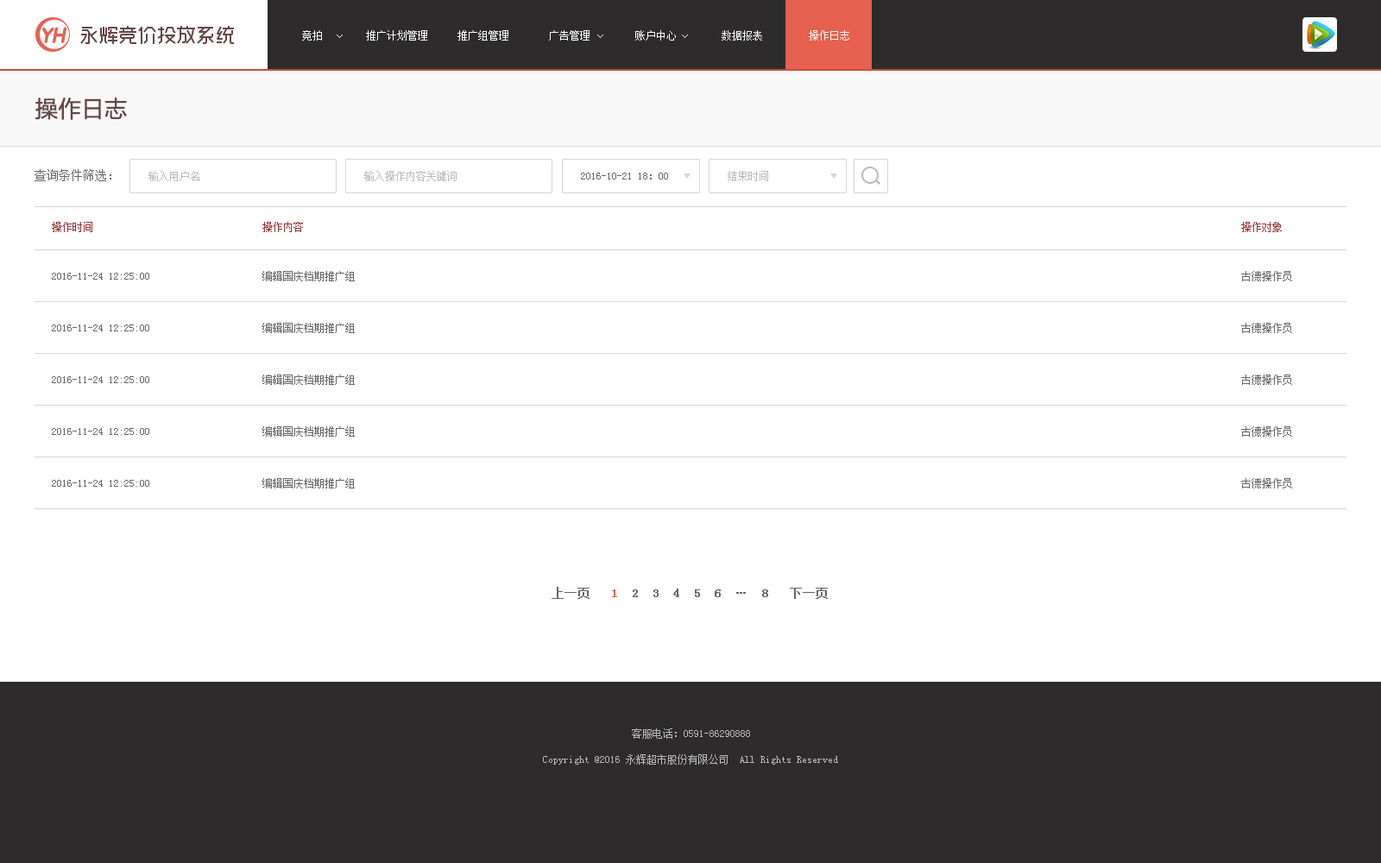
<style>
.page{position:relative;width:1381px;height:863px;background:#ffffff}
.page>*{position:absolute;margin:0}
.t1{font:10.4px "SimSun";color:#ffffff}
.t2{font:10.4px "SimSun";color:#f8f8f8}
.t3{font:22.4px "MicrosoftYaHei";color:#664545;font-weight:bold}
.t4{font:12.1px "SimSun";color:#666666}
.t5{font:10.4px "SimSun";color:#bababa}
.t6{font:10.4px "SimSun";color:#666666}
.t7{font:10.4px "SimSun";color:#953232}
.t8{font:12.1px "SimSun";color:#666666;font-weight:bold}
.t9{font:12.1px "SimSun";color:#e6614f;font-weight:bold}
</style>
<div class="page">
<p class="t1" style="left:302px;top:30px;width:20px;height:11px">竞拍</p>
<p class="t1" style="left:366px;top:30px;width:61px;height:11px">推广计划管理</p>
<p class="t1" style="left:458px;top:30px;width:50px;height:11px">推广组管理</p>
<p class="t1" style="left:549px;top:30px;width:41px;height:11px">广告管理</p>
<p class="t1" style="left:635px;top:30px;width:41px;height:11px">账户中心</p>
<p class="t2" style="left:722px;top:30px;width:40px;height:11px">数据报表</p>
<p class="t2" style="left:809px;top:30px;width:40px;height:11px">操作日志</p>
<p class="t3" style="left:35px;top:98px;width:92px;height:22px">操作日志</p>
<p class="t4" style="left:35px;top:169px;width:76px;height:12px">查询条件筛选：</p>
<p class="t5" style="left:148px;top:171px;width:51px;height:10px">输入用户名</p>
<p class="t5" style="left:364px;top:171px;width:93px;height:10px">输入操作内容关键词</p>
<p class="t6" style="left:581px;top:173px;width:87px;height:7px">2016-10-21 18：00</p>
<p class="t5" style="left:728px;top:171px;width:40px;height:10px">结束时间</p>
<p class="t7" style="left:52px;top:222px;width:40px;height:10px">操作时间</p>
<p class="t7" style="left:262px;top:222px;width:41px;height:10px">操作内容</p>
<p class="t7" style="left:1241px;top:222px;width:41px;height:10px">操作对象</p>
<p class="t6" style="left:52px;top:273px;width:97px;height:7px">2016-11-24 12:25:00</p>
<p class="t6" style="left:262px;top:271px;width:93px;height:10px">编辑国庆档期推广组</p>
<p class="t6" style="left:1241px;top:271px;width:51px;height:10px">古德操作员</p>
<p class="t6" style="left:52px;top:325px;width:97px;height:7px">2016-11-24 12:25:00</p>
<p class="t6" style="left:262px;top:323px;width:93px;height:10px">编辑国庆档期推广组</p>
<p class="t6" style="left:1241px;top:323px;width:51px;height:10px">古德操作员</p>
<p class="t6" style="left:52px;top:376px;width:97px;height:7px">2016-11-24 12:25:00</p>
<p class="t6" style="left:262px;top:375px;width:93px;height:10px">编辑国庆档期推广组</p>
<p class="t6" style="left:1241px;top:375px;width:51px;height:10px">古德操作员</p>
<p class="t6" style="left:52px;top:428px;width:97px;height:7px">2016-11-24 12:25:00</p>
<p class="t6" style="left:262px;top:426px;width:93px;height:11px">编辑国庆档期推广组</p>
<p class="t6" style="left:1241px;top:426px;width:51px;height:11px">古德操作员</p>
<p class="t6" style="left:52px;top:480px;width:97px;height:7px">2016-11-24 12:25:00</p>
<p class="t6" style="left:262px;top:478px;width:93px;height:11px">编辑国庆档期推广组</p>
<p class="t6" style="left:1241px;top:478px;width:51px;height:11px">古德操作员</p>
<p class="t8" style="left:552px;top:587px;width:276px;height:12px">上一页   <span class="t9">1  </span>2  3  4  5  6  …  8   下一页</p>
<p class="t5" style="left:632px;top:729px;width:118px;height:10px">客服电话：0591-86290888</p>
<p class="t5" style="left:543px;top:755px;width:295px;height:10px">Copyright @2016 永辉超市股份有限公司  All Rights Reserved</p>
</div>
